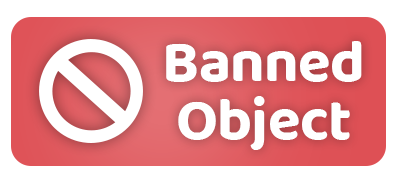
<style>
.page{position:relative;width:400px;height:180px;background:#ffffff}
.page>*{position:absolute;margin:0}
.t1{font:60px "BalooDa2-Bold";letter-spacing:-0.01em;color:#ffffff}
</style>
<div class="page">
<p class="t1" style="left:166px;top:41px;width:196px;height:41px">Banned</p>
<p class="t1" style="left:178px;top:96px;width:172px;height:54px">Object</p>
</div>
